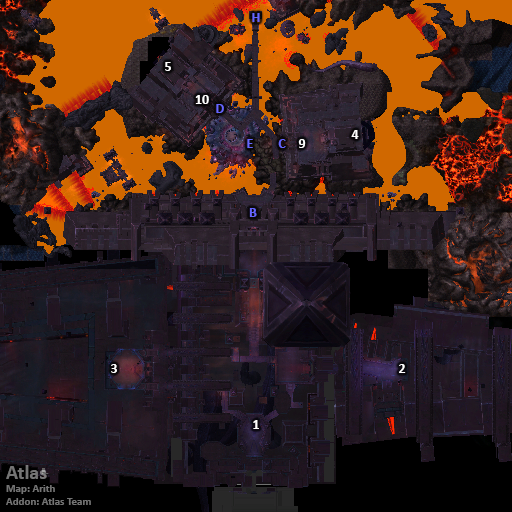
<style>
.page{position:relative;width:512px;height:512px}
.page>*{position:absolute;margin:0}
.t1{font:14px "Calibri-Bold";color:#6666ff}
.t2{font:14px "Calibri-Bold";color:#ffffff}
.t3{font:11px "Calibri-Bold";color:#747474}
.t4{font:20px "Calibri-Bold";color:#747474}
</style>
<div class="page">
<p class="t1" style="left:252px;top:13px;width:8px;height:9px">H</p>
<p class="t2" style="left:165px;top:62px;width:6px;height:9px">5</p>
<p class="t2" style="left:195px;top:95px;width:14px;height:9px">10</p>
<p class="t1" style="left:216px;top:104px;width:8px;height:9px">D</p>
<p class="t2" style="left:351px;top:130px;width:8px;height:9px">4</p>
<p class="t1" style="left:247px;top:139px;width:6px;height:9px">E</p>
<p class="t1" style="left:278px;top:139px;width:8px;height:9px">C</p>
<p class="t2" style="left:298px;top:139px;width:8px;height:9px">9</p>
<p class="t1" style="left:249px;top:208px;width:8px;height:9px">B</p>
<p class="t2" style="left:111px;top:364px;width:6px;height:9px">3</p>
<p class="t2" style="left:399px;top:364px;width:7px;height:9px">2</p>
<p class="t2" style="left:253px;top:420px;width:6px;height:9px">1</p>
<p class="t3" style="left:6px;top:465px;width:85px;height:40px"><span class="t4">Atlas<br></span>Map: Arith<br>Addon: Atlas Team</p>
</div>
